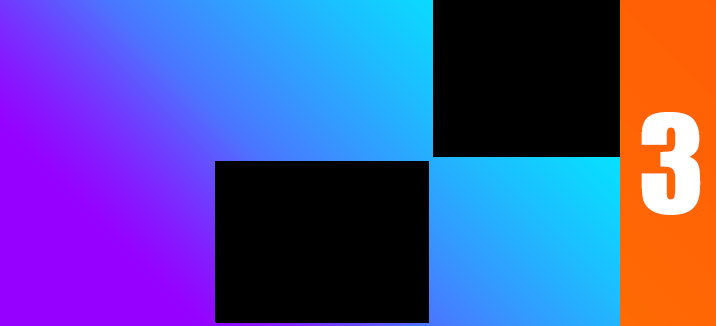
<style>
.page{position:relative;width:716px;height:326px;background:#000000}
.page>*{position:absolute;margin:0}
.t1{font:125px "Impact";color:#ffffff}
</style>
<div class="page">
<p class="t1" style="left:641px;top:112px;width:60px;height:103px">3</p>
</div>
